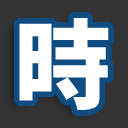
<style>
.page{position:relative;width:128px;height:128px;background:#333333}
.page>*{position:absolute;margin:0}
.t1{font:97px "NotoSansTC-Black";color:#ffffff}
</style>
<div class="page">
<p class="t1" style="left:19px;top:17px;width:90px;height:94px">時</p>
</div>
